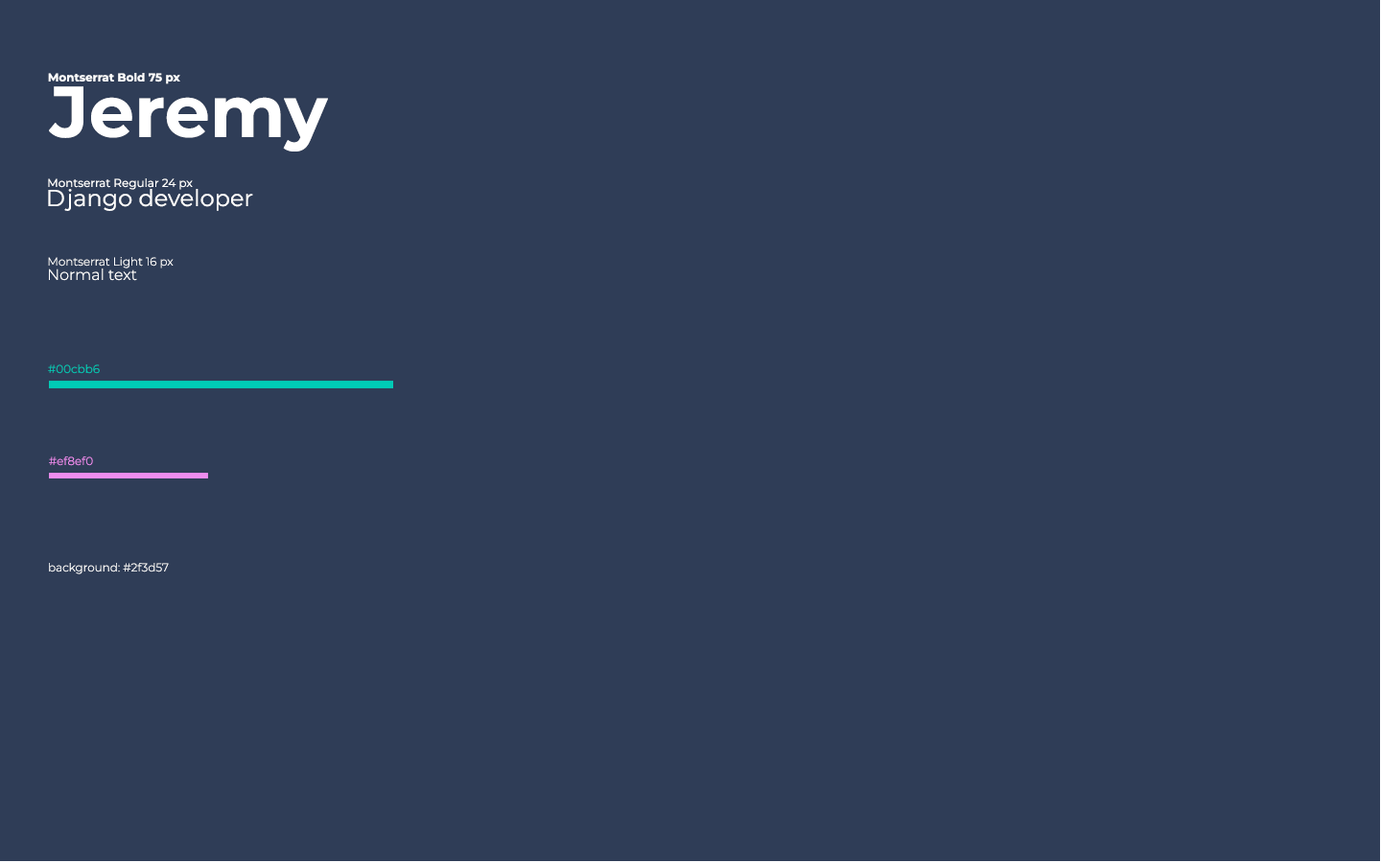
<style>
.page{position:relative;width:1381px;height:863px;background:#2f3d57}
.page>*{position:absolute;margin:0}
.t1{font:11.5px "Montserrat-Bold";color:#ffffff}
.t2{font:71.9px "Montserrat-Bold";color:#ffffff}
.t3{font:11.5px "Montserrat-Regular";color:#ffffff}
.t4{font:23px "Montserrat-Regular";color:#ffffff}
.t5{font:11.5px "Montserrat-Light";color:#ffffff}
.t6{font:15.3px "Montserrat-Light";color:#ffffff}
.t7{font:11.5px "Montserrat-Light";color:#00cbb6}
.t8{font:11.5px "Montserrat-Light";color:#ef8ef0}
</style>
<div class="page">
<p class="t1" style="left:48px;top:73px;width:132px;height:11px">Montserrat Bold 75 px</p>
<p class="t2" style="left:49px;top:86px;width:279px;height:66px">Jeremy</p>
<p class="t3" style="left:48px;top:178px;width:145px;height:12px">Montserrat Regular 24 px</p>
<p class="t4" style="left:48px;top:189px;width:205px;height:22px">Django developer</p>
<p class="t5" style="left:48px;top:257px;width:126px;height:12px">Montserrat Light 16 px</p>
<p class="t6" style="left:49px;top:269px;width:88px;height:12px">Normal text</p>
<p class="t7" style="left:48px;top:365px;width:52px;height:9px">#00cbb6</p>
<p class="t8" style="left:49px;top:457px;width:44px;height:9px">#ef8ef0</p>
<p class="t5" style="left:49px;top:563px;width:120px;height:12px">background: #2f3d57</p>
</div>
